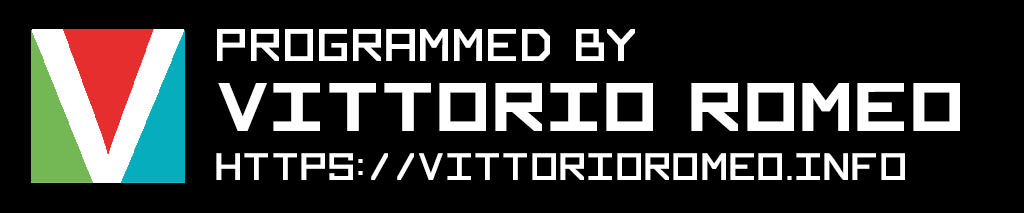
<style>
.page{position:relative;width:1024px;height:213px;background:#000000}
.page>*{position:absolute;margin:0}
.t1{font:50px "OpenSquare-Regular";color:#ffffff;text-transform:uppercase}
.t2{font:75px "OpenSquare-Bold";color:#ffffff}
.t3{font:41.7px "OpenSquare-Regular";color:#ffffff;text-transform:uppercase}
</style>
<div class="page">
<p class="t1" style="left:217px;top:29px;width:418px;height:32px">Programmed by</p>
<p class="t2" style="left:218px;top:83px;width:742px;height:48px">VITTORIO ROMEO</p>
<p class="t3" style="left:216px;top:153px;width:689px;height:27px">https://vittorioromeo.info</p>
</div>
